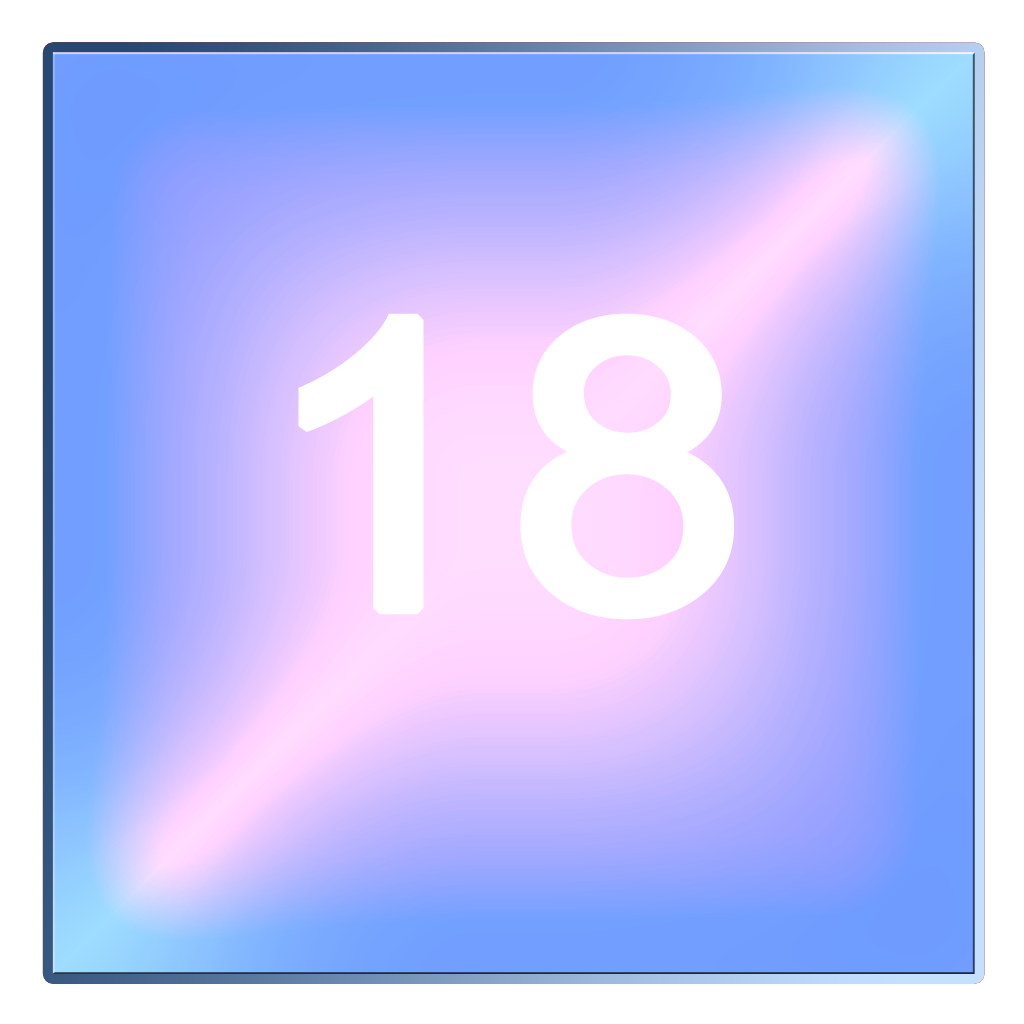
<style>
.page{position:relative;width:1024px;height:1024px;background:#ffffff}
.page>*{position:absolute;margin:0}
.t1{font:400px "ArialNarrow";color:#ffffff;font-weight:bold;scale:1.3 1}
</style>
<div class="page">
<p class="t1" style="left:298px;top:313px;width:436px;height:307px">18</p>
</div>
